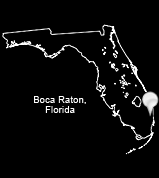
<style>
.page{position:relative;width:159px;height:178px;background:#000000}
.page>*{position:absolute;margin:0}
.t1{font:9px/10px "ArialMT";letter-spacing:0.04em;color:#ffffff}
</style>
<div class="page">
<p class="t1" style="left:34px;top:96px;width:52px;height:17px;text-align:center">Boca Raton,<br>Florida</p>
</div>
